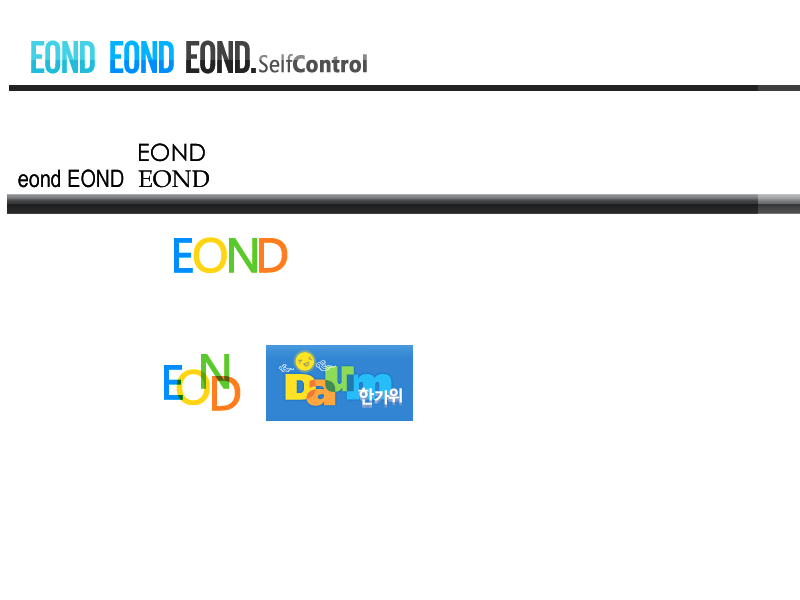
<style>
.page{position:relative;width:800px;height:600px;background:#ffffff}
.page>*{position:absolute;margin:0}
.t1{font:48px "AlternateGothicEFOP-NoTwo";letter-spacing:-0.05em}
.t2{font:24px "SegoeUI-Bold";color:#505050;font-weight:bold;scale:0.85 1}
.t3{font:24px "SegoeUI-Regular";color:#505050;font-weight:bold;scale:0.85 1}
.t4{font:24px "CenturyGothic";color:#000000}
.t5{font:24px "ArialNarrow";color:#000000}
.t6{font:24px "BookAntiqua";color:#000000}
.t7{font:48px "SegoeUI-Regular";letter-spacing:-0.05em;color:#008dff;font-weight:bold}
.t8{font:48px "SegoeUI-Regular";letter-spacing:-0.05em;color:#ffe226;font-weight:bold}
.t9{font:48px "SegoeUI-Regular";letter-spacing:-0.05em;color:#58ca2e;font-weight:bold}
.t10{font:48px "SegoeUI-Regular";letter-spacing:-0.05em;color:#ff7c21;font-weight:bold}
</style>
<div class="page">
<p class="t1" style="left:31px;top:40px;width:64px;height:34px">EOND</p>
<p class="t1" style="left:110px;top:40px;width:64px;height:34px">EOND</p>
<p class="t1" style="left:186px;top:40px;width:70px;height:34px">EOND.</p>
<p class="t2" style="left:259px;top:54px;width:108px;height:19px"><span class="t3">Self</span>Control</p>
<p class="t4" style="left:139px;top:143px;width:66px;height:19px">EOND</p>
<p class="t5" style="left:18px;top:169px;width:106px;height:19px">eond EOND</p>
<p class="t6" style="left:138px;top:170px;width:71px;height:18px">EOND</p>
<p class="t7" style="left:174px;top:238px;width:19px;height:35px">E</p>
<p class="t8" style="left:193px;top:237px;width:34px;height:36px">O</p>
<p class="t9" style="left:229px;top:238px;width:29px;height:35px">N</p>
<p class="t10" style="left:259px;top:238px;width:29px;height:35px">D</p>
<p class="t7" style="left:164px;top:365px;width:19px;height:35px">E</p>
<p class="t9" style="left:201px;top:354px;width:29px;height:35px">N</p>
<p class="t8" style="left:176px;top:369px;width:34px;height:36px">O</p>
<p class="t10" style="left:212px;top:376px;width:29px;height:35px">D</p>
</div>
